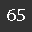
<style>
.page{position:relative;width:32px;height:32px;background:#333333}
.page>*{position:absolute;margin:0}
.t1{font:17.8px "MyriadPro-Regular";color:#ffffff;scale:1.12 1}
</style>
<div class="page">
<p class="t1" style="left:7px;top:9px;width:18px;height:12px">65=5</p>
</div>
